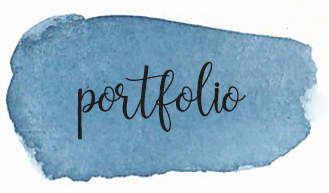
<style>
.page{position:relative;width:329px;height:193px}
.page>*{position:absolute;margin:0}
.t1{font:72px "LillyMae-Regular";color:#1f1e1e}
</style>
<div class="page">
<p class="t1" style="left:77px;top:61px;width:169px;height:79px">portfolio</p>
</div>
